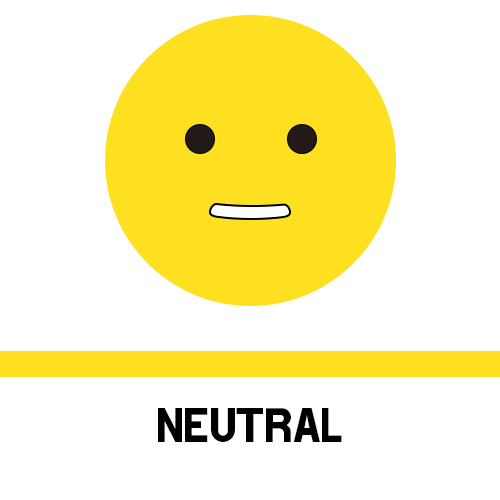
<style>
.page{position:relative;width:500px;height:500px;background:#ffffff}
.page>*{position:absolute;margin:0}
.t1{font:48px "HotelDeParisXe";color:#000000}
</style>
<div class="page">
<p class="t1" style="left:158px;top:408px;width:184px;height:34px">neutral</p>
</div>
